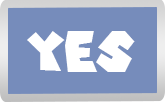
<style>
.page{position:relative;width:165px;height:102px;background:#768cbb}
.page>*{position:absolute;margin:0}
.t1{font:54.8px "SuperMarioGalaxy";color:#ffffff}
</style>
<div class="page">
<p class="t1" style="left:27px;top:31px;width:108px;height:41px">YES</p>
</div>
